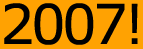
<style>
.page{position:relative;width:143px;height:49px;background:#ffa202}
.page>*{position:absolute;margin:0}
.t1{font:55px "Verdana";letter-spacing:-0.1em;color:#000000;font-weight:bold}
</style>
<div class="page">
<p class="t1" style="left:4px;top:3px;width:134px;height:42px">2007!</p>
</div>
